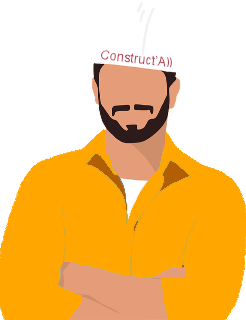
<style>
.page{position:relative;width:246px;height:320px;background:#ffffff}
.page>*{position:absolute;margin:0}
.t1{font:12px "ArialMT";color:#bc4359}
</style>
<div class="page">
<p class="t1" style="left:101px;top:50px;width:71px;height:18px;rotate:7deg">Construct’All</p>
</div>
